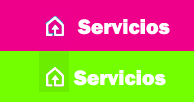
<style>
.page{position:relative;width:194px;height:102px;background:#ee008a}
.page>*{position:absolute;margin:0}
.t1{font:21.5px "FranklinGothic-Heavy";color:#ffffff}
</style>
<div class="page">
<p class="t1" style="left:77px;top:19px;width:93px;height:16px">Servicios</p>
<p class="t1" style="left:73px;top:70px;width:93px;height:16px">Servicios</p>
</div>
